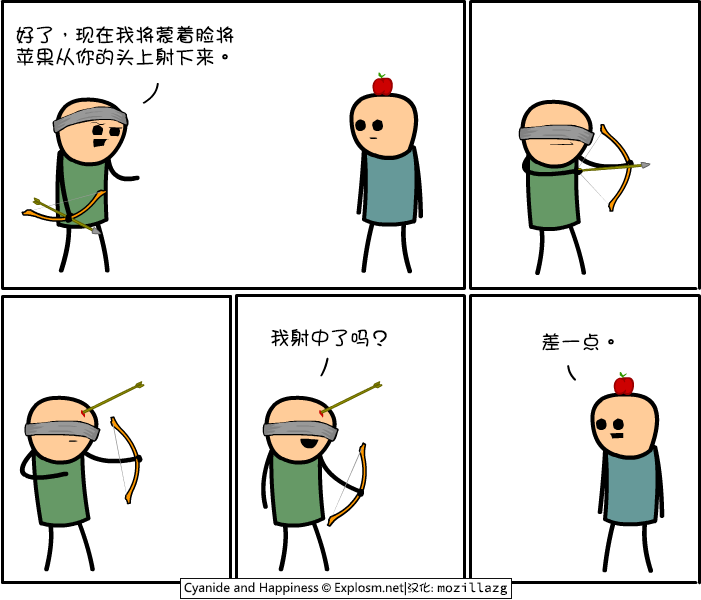
<style>
.page{position:relative;width:701px;height:600px;background:#ffffff}
.page>*{position:absolute;margin:0}
.t1{font:20px/22px "DFGirl";color:#000000}
.t2{font:20px "DFGirl";color:#000000}
</style>
<div class="page">
<p class="t1" style="left:16px;top:25px;width:218px;height:41px">好了，现在我将蒙着脸将<br>苹果从你的头上射下来。</p>
<p class="t2" style="left:270px;top:329px;width:117px;height:18px">我射中了吗？</p>
<p class="t2" style="left:542px;top:333px;width:72px;height:18px">差一点。</p>
</div>
